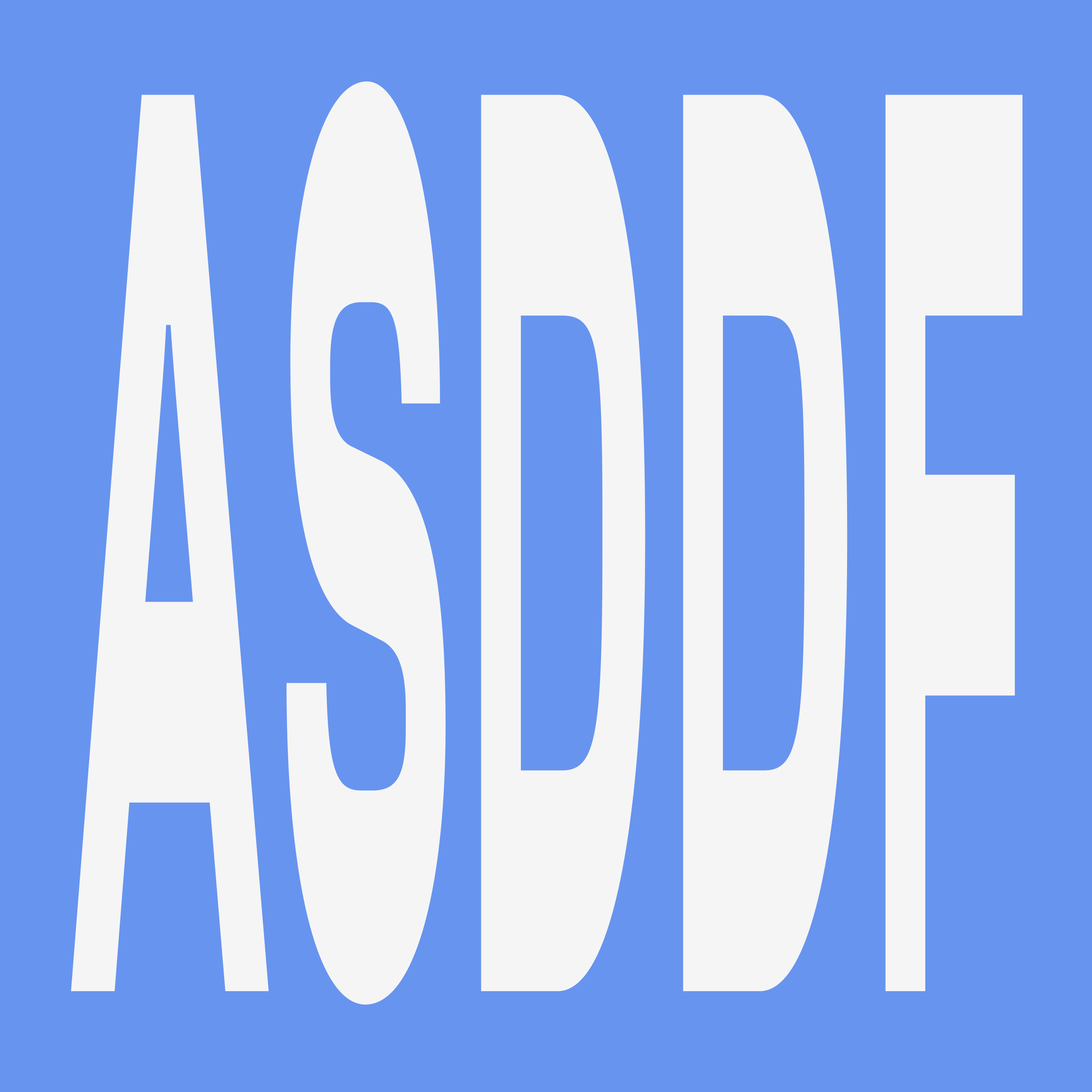
<style>
.page{position:relative;width:1092px;height:1092px;background:#6794ef}
.page>*{position:absolute;margin:0}
.t1{font:1337.8px "Monobloc-Bold";color:#f5f5f5;scale:0.22 1}
</style>
<div class="page">
<p class="t1" style="left:71px;top:81px;width:951px;height:924px">ASDDF</p>
</div>
